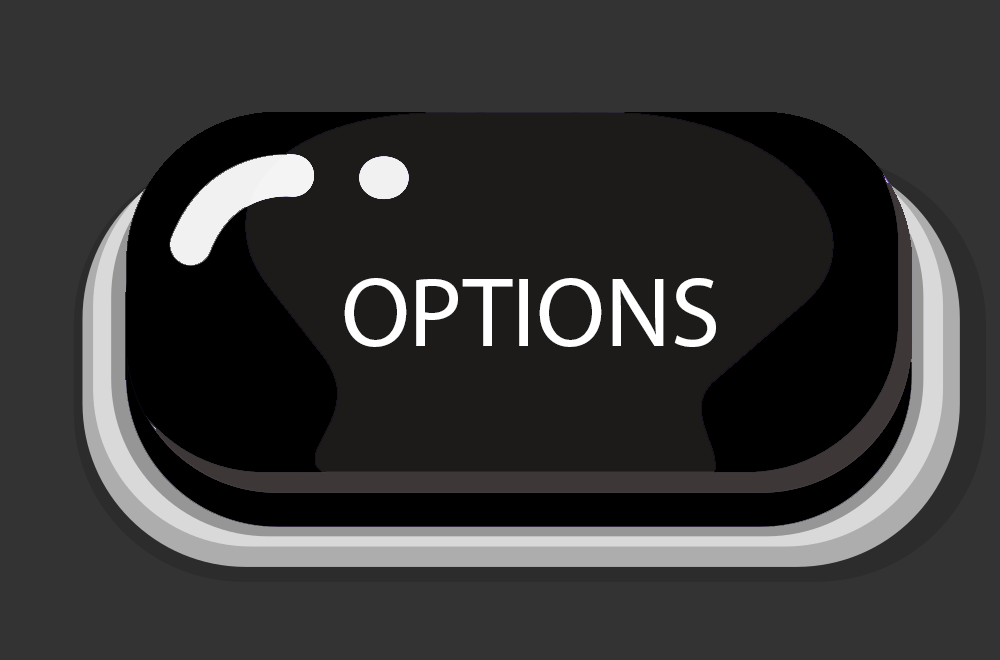
<style>
.page{position:relative;width:1000px;height:660px;background:#333333}
.page>*{position:absolute;margin:0}
.t1{font:100px "MyriadPro-Regular";color:#ffffff}
</style>
<div class="page">
<p class="t1" style="left:344px;top:278px;width:372px;height:69px">OPTIONS</p>
</div>
